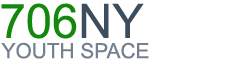
<style>
.page{position:relative;width:233px;height:63px;background:#ffffff}
.page>*{position:absolute;margin:0}
.t1{font:47.4px "ArialMT";color:#14880c}
.t2{font:47.4px "ArialMT";color:#3e4d5c}
.t3{font:20.9px "ArialMT";color:#75818e}
</style>
<div class="page">
<p class="t1" style="left:1px;top:3px;width:143px;height:36px">706<span class="t2">NY</span></p>
<p class="t3" style="left:1px;top:42px;width:148px;height:17px">YOUTH SPACE</p>
</div>
